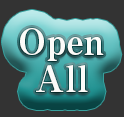
<style>
.page{position:relative;width:124px;height:117px;background:#333333}
.page>*{position:absolute;margin:0}
.t1{font:36px/37px "RyuminPro-ExBold";color:#fbfbf9}
</style>
<div class="page">
<p class="t1" style="left:20px;top:28px;width:84px;height:64px;text-align:center">Open<br>All</p>
</div>
